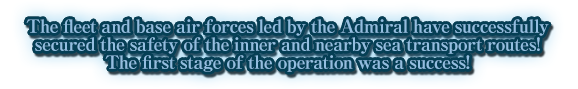
<style>
.page{position:relative;width:578px;height:89px}
.page>*{position:absolute;margin:0}
.t1{font:18px/18px "RyuminPro-ExBold";letter-spacing:-0.04em;color:#93bee0}
</style>
<div class="page">
<p class="t1" style="left:26px;top:19px;width:523px;height:53px;text-align:center">The fleet and base air forces led by the Admiral have successfully<br>secured the safety of the inner and nearby sea transport routes!<br>The first stage of the operation was a success!</p>
</div>
